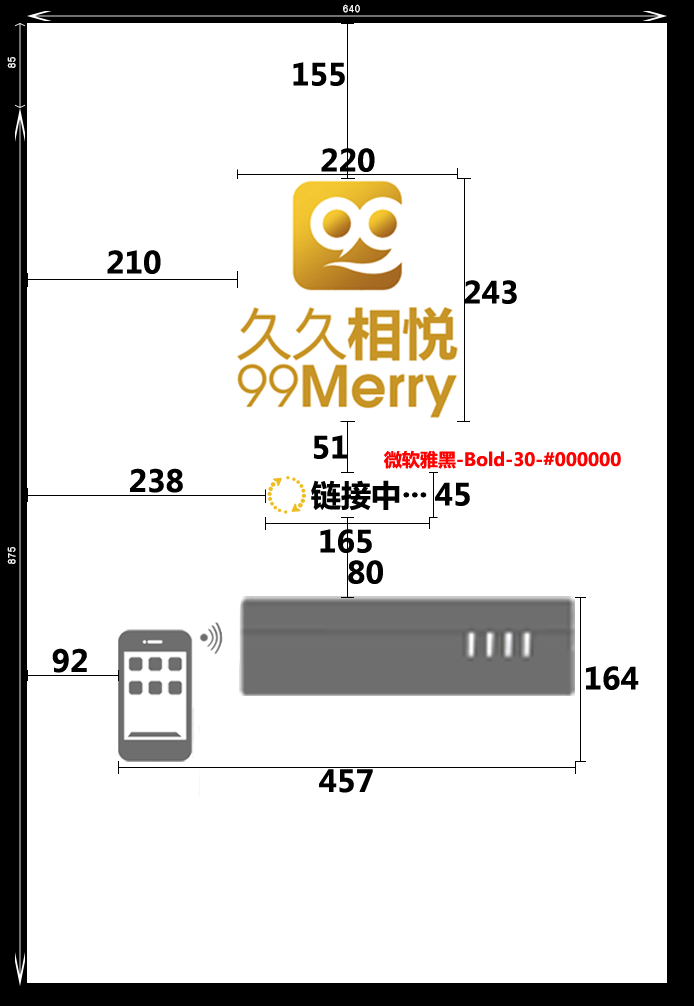
<style>
.page{position:relative;width:694px;height:1006px;background:#ffffff}
.page>*{position:absolute;margin:0}
.t1{font:30px "MicrosoftYaHei-Bold";color:#000000}
.t2{font:18px "MicrosoftYaHei-Bold";color:#ff0000}
</style>
<div class="page">
<p class="t1" style="left:293px;top:62px;width:52px;height:24px">155</p>
<p class="t1" style="left:321px;top:148px;width:54px;height:24px">220</p>
<p class="t1" style="left:107px;top:250px;width:54px;height:24px">210</p>
<p class="t1" style="left:464px;top:280px;width:53px;height:24px">243</p>
<p class="t1" style="left:314px;top:435px;width:33px;height:24px">51</p>
<p class="t2" style="left:384px;top:450px;width:237px;height:19px">微软雅黑-Bold-30-#000000</p>
<p class="t1" style="left:130px;top:468px;width:53px;height:25px">238</p>
<p class="t1" style="left:311px;top:480px;width:89px;height:31px">链接中</p>
<p class="t1" style="left:435px;top:482px;width:35px;height:24px">45</p>
<p class="t1" style="left:403px;top:492px;width:24px;height:6px">...</p>
<p class="t1" style="left:320px;top:529px;width:52px;height:24px">165</p>
<p class="t1" style="left:348px;top:560px;width:35px;height:24px">80</p>
<p class="t1" style="left:52px;top:648px;width:35px;height:25px">92</p>
<p class="t1" style="left:586px;top:666px;width:53px;height:24px">164</p>
<p class="t1" style="left:319px;top:769px;width:54px;height:24px">457</p>
</div>
